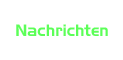
<style>
.page{position:relative;width:123px;height:60px;background:#ffffff}
.page>*{position:absolute;margin:0}
.t1{font:16px "AeroRegularSWFTE";color:#5cff58}
</style>
<div class="page">
<p class="t1" style="left:16px;top:24px;width:92px;height:12px">Nachrichten</p>
</div>
